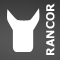
<style>
.page{position:relative;width:60px;height:60px;background:#ffffff}
.page>*{position:absolute;margin:0}
.t1{font:11px "Verdana-Bold";color:#ffffff}
</style>
<div class="page">
<p class="t1" style="left:46px;top:3px;width:9px;height:52px;rotate:-90deg">RANCOR</p>
</div>
